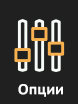
<style>
.page{position:relative;width:78px;height:104px;background:#202020}
.page>*{position:absolute;margin:0}
.t1{font:12px "Calibri-Bold";color:#ffffff}
</style>
<div class="page">
<p class="t1" style="left:18px;top:84px;width:45px;height:13px">Опции</p>
</div>
